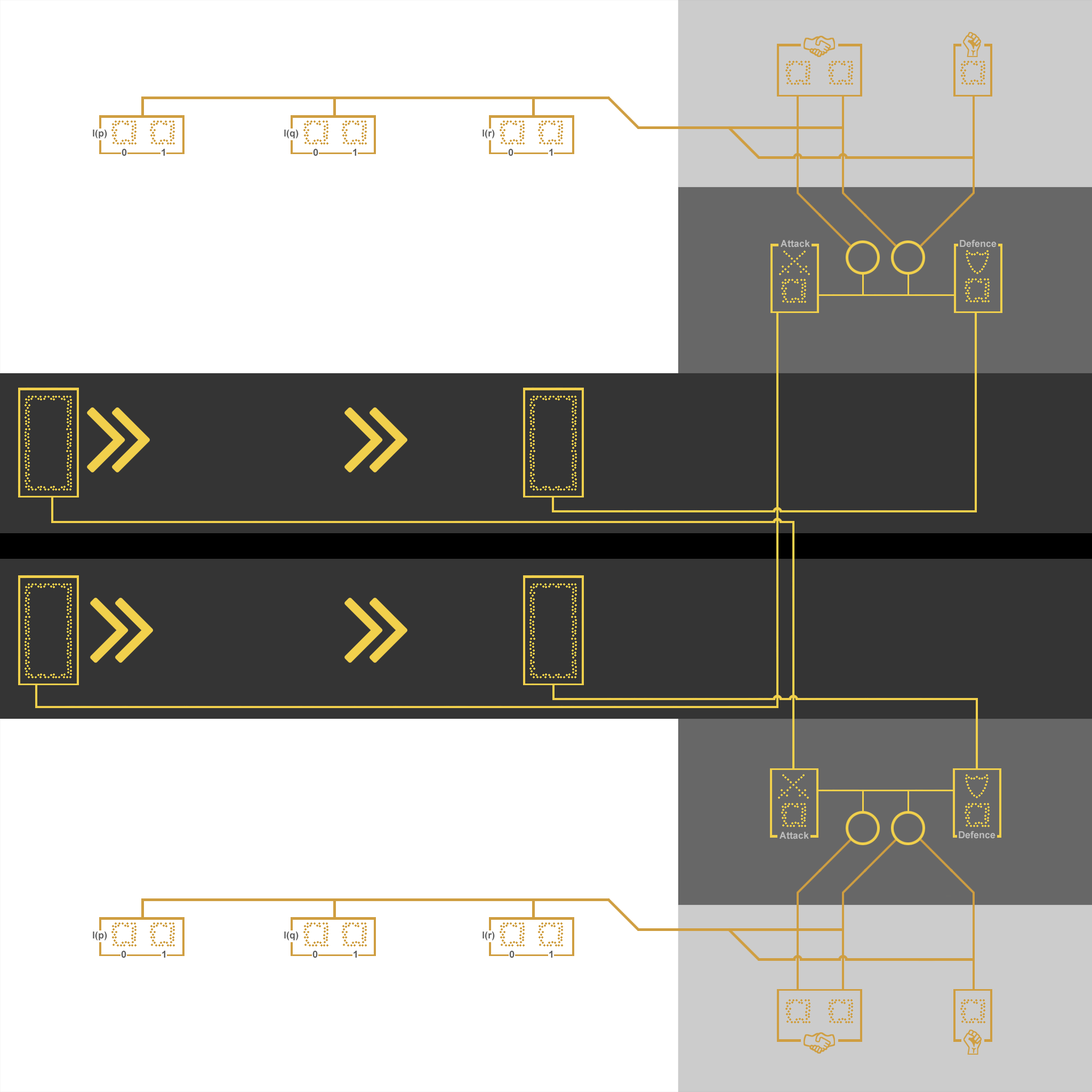
<style>
.page{position:relative;width:1092px;height:1092px;background:#ffffff}
.page>*{position:absolute;margin:0}
.t1{font:9.6px "Arial-BoldMT";color:#5c5c5c}
.t2{font:9.6px "Arial-BoldMT";color:#bcbcbc}
</style>
<div class="page">
<p class="t1" style="left:93px;top:130px;width:14px;height:9px">l(p)</p>
<p class="t1" style="left:284px;top:130px;width:15px;height:9px">l(q)</p>
<p class="t1" style="left:483px;top:130px;width:12px;height:9px">l(r)</p>
<p class="t1" style="left:122px;top:149px;width:5px;height:7px">0</p>
<p class="t1" style="left:162px;top:149px;width:3px;height:7px">1</p>
<p class="t1" style="left:313px;top:149px;width:5px;height:7px">0</p>
<p class="t1" style="left:353px;top:149px;width:3px;height:7px">1</p>
<p class="t1" style="left:508px;top:149px;width:5px;height:7px">0</p>
<p class="t1" style="left:549px;top:149px;width:3px;height:7px">1</p>
<p class="t2" style="left:781px;top:240px;width:29px;height:7px">Attack</p>
<p class="t2" style="left:960px;top:239px;width:37px;height:8px">Defence</p>
<p class="t2" style="left:780px;top:832px;width:29px;height:7px">Attack</p>
<p class="t2" style="left:959px;top:831px;width:36px;height:8px">Defence</p>
<p class="t1" style="left:93px;top:931px;width:14px;height:10px">l(p)</p>
<p class="t1" style="left:284px;top:931px;width:15px;height:10px">l(q)</p>
<p class="t1" style="left:483px;top:931px;width:12px;height:10px">l(r)</p>
<p class="t1" style="left:121px;top:951px;width:5px;height:7px">0</p>
<p class="t1" style="left:162px;top:951px;width:3px;height:7px">1</p>
<p class="t1" style="left:312px;top:951px;width:6px;height:7px">0</p>
<p class="t1" style="left:354px;top:951px;width:3px;height:7px">1</p>
<p class="t1" style="left:509px;top:951px;width:6px;height:7px">0</p>
<p class="t1" style="left:549px;top:951px;width:3px;height:7px">1</p>
</div>
